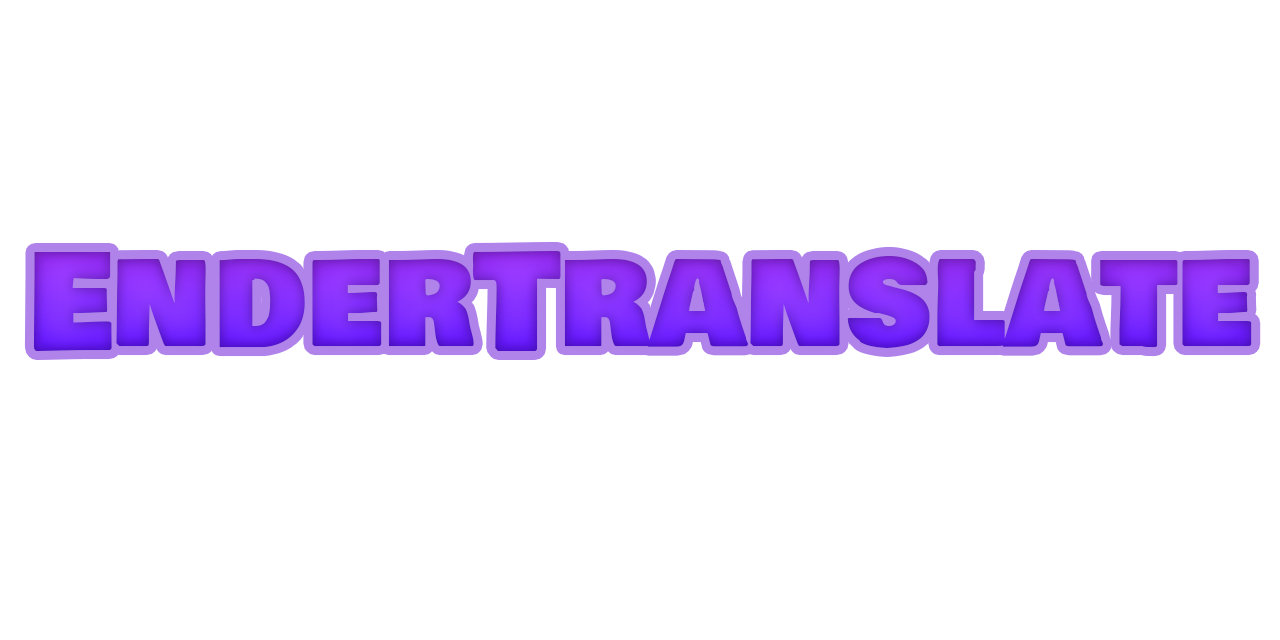
<style>
.page{position:relative;width:1280px;height:640px;background:#ffffff}
.page>*{position:absolute;margin:0}
.t1{font:132.9px "BowlbyOneSC-Regular"}
</style>
<div class="page">
<p class="t1" style="left:33px;top:251px;width:1219px;height:100px">EnderTranslate</p>
</div>
